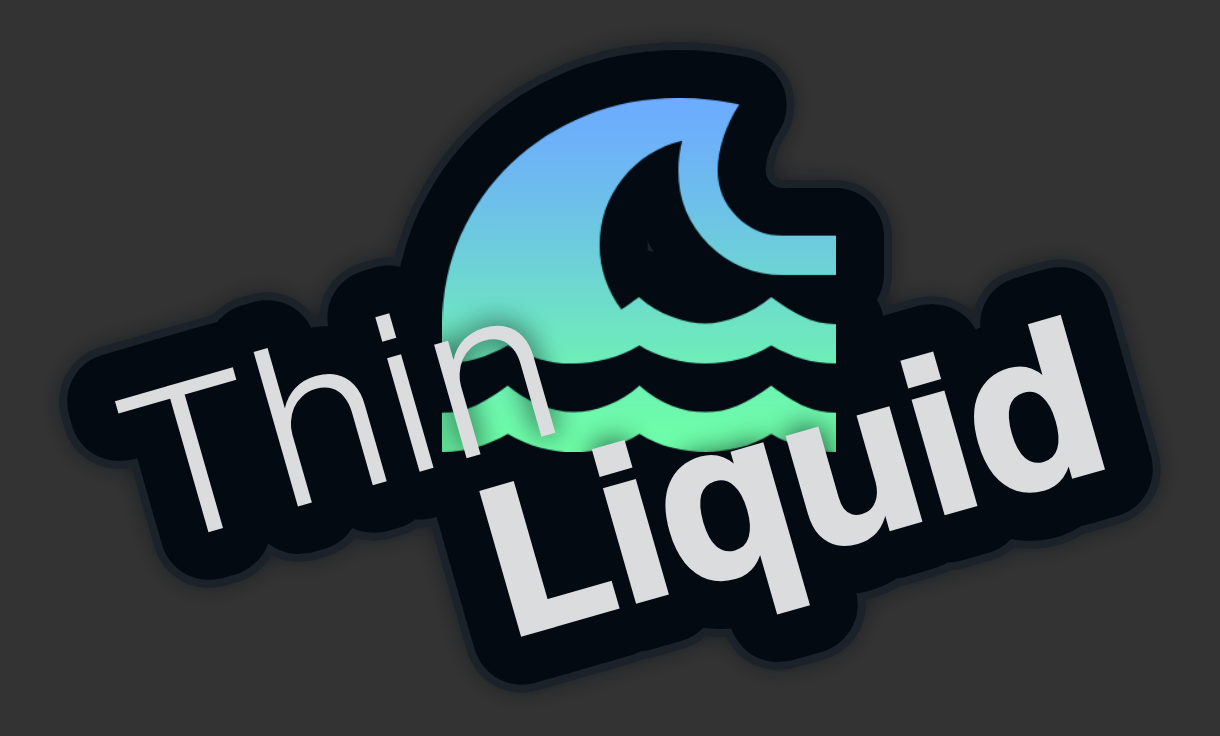
<style>
.page{position:relative;width:1220px;height:736px;background:#333333}
.page>*{position:absolute;margin:0}
.t1{font:223.2px "SwitzerVariable-Light";color:#dadcdd}
.t2{font:223.2px "SwitzerVariable-Bold";color:#dadcdd}
</style>
<div class="page">
<p class="t1" style="left:114px;top:313px;width:442px;height:220px;rotate:-16deg">Thin</p>
<p class="t2" style="left:479px;top:314px;width:627px;height:323px;rotate:-16deg">Liquid</p>
</div>
